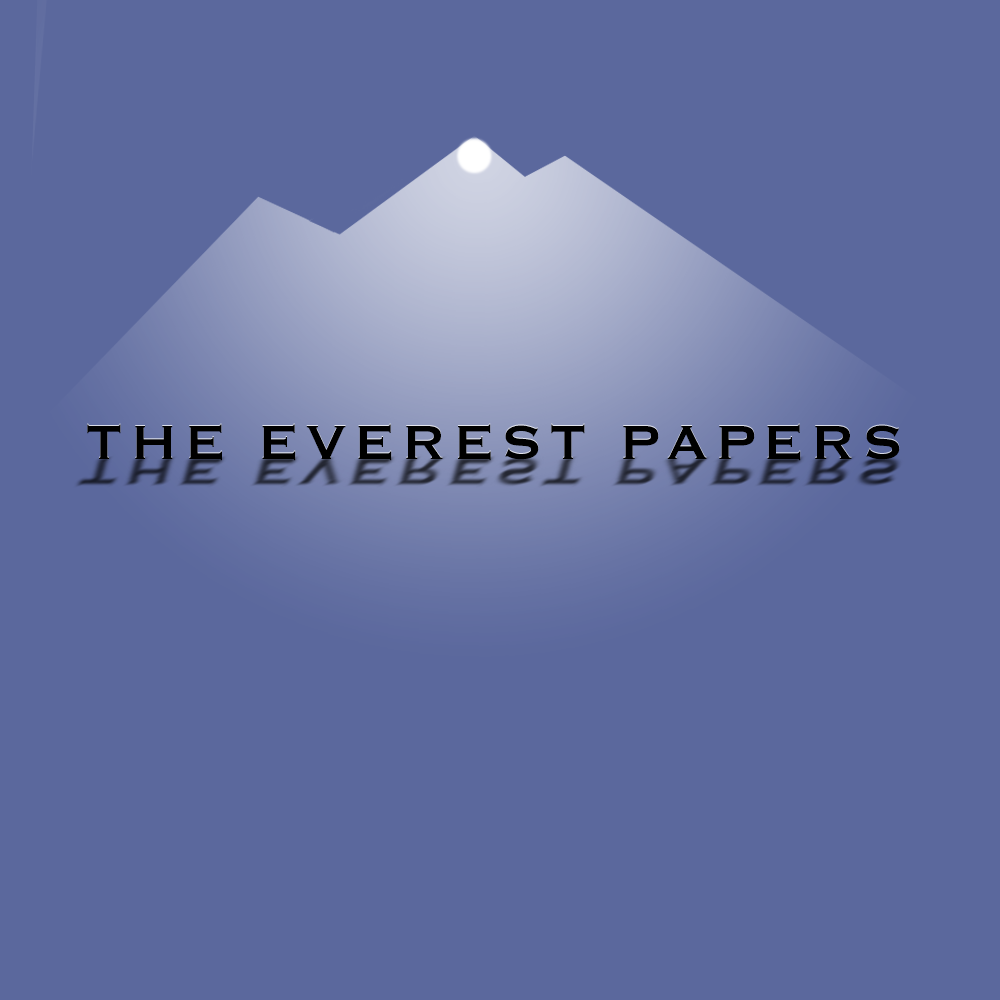
<style>
.page{position:relative;width:1000px;height:1000px;background:#5b689d}
.page>*{position:absolute;margin:0}
.t1{font:62.5px "Copperplate";letter-spacing:0.1em;color:#000000}
</style>
<div class="page">
<p class="t1" style="left:87px;top:424px;width:813px;height:37px">THE EVEREST PAPERS</p>
</div>
